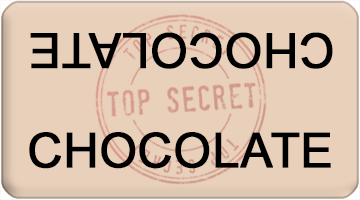
<style>
.page{position:relative;width:360px;height:200px;background:#e8d0bb}
.page>*{position:absolute;margin:0}
.t1{font:48px "ArialMT";color:#000000;font-weight:bold}
</style>
<div class="page">
<p class="t1" style="left:30px;top:32px;width:303px;height:37px;rotate:180deg">CHOCOLATE</p>
<p class="t1" style="left:29px;top:132px;width:302px;height:37px">CHOCOLATE</p>
</div>
